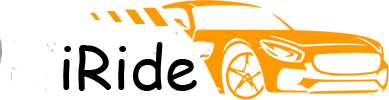
<style>
.page{position:relative;width:389px;height:100px;background:#ffffff}
.page>*{position:absolute;margin:0}
.t1{font:60px "ComicSansMS";color:#000000}
</style>
<div class="page">
<p class="t1" style="left:63px;top:42px;width:134px;height:49px">iRide</p>
</div>
